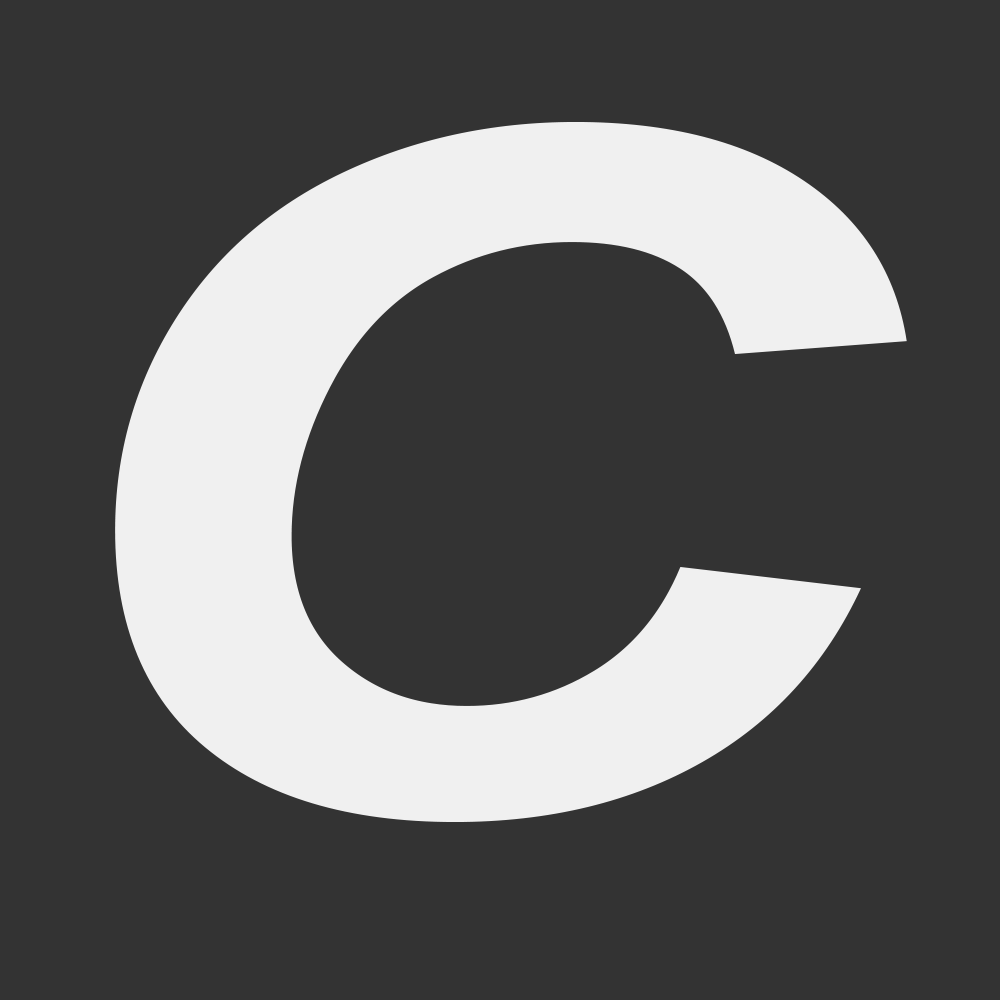
<style>
.page{position:relative;width:1000px;height:1000px;background:#333333}
.page>*{position:absolute;margin:0}
.t1{font:943.9px "Arial-BoldItalicMT";letter-spacing:0.1em;color:#f0f0f0;scale:1.29 1}
</style>
<div class="page">
<p class="t1" style="left:115px;top:122px;width:792px;height:700px">C</p>
</div>
